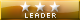
<style>
.page{position:relative;width:80px;height:20px}
.page>*{position:absolute;margin:0}
.t1{font:9px "Silkscreen";color:#e8e8e8}
</style>
<div class="page">
<p class="t1" style="left:25px;top:13px;width:31px;height:5px">Leader</p>
</div>
